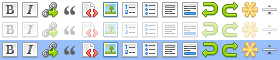
<style>
.page{position:relative;width:280px;height:60px;background:#ffffff}
.page>*{position:absolute;margin:0}
.t1{font:36px "PlantagenetCherokee";color:#5f5f5f}
.t2{font:36px "PlantagenetCherokee";color:#bfbfbf}
</style>
<div class="page">
<p class="t1" style="left:64px;top:6px;width:11px;height:9px">“</p>
<p class="t2" style="left:64px;top:26px;width:11px;height:9px">“</p>
<p class="t1" style="left:64px;top:46px;width:11px;height:9px">“</p>
</div>
